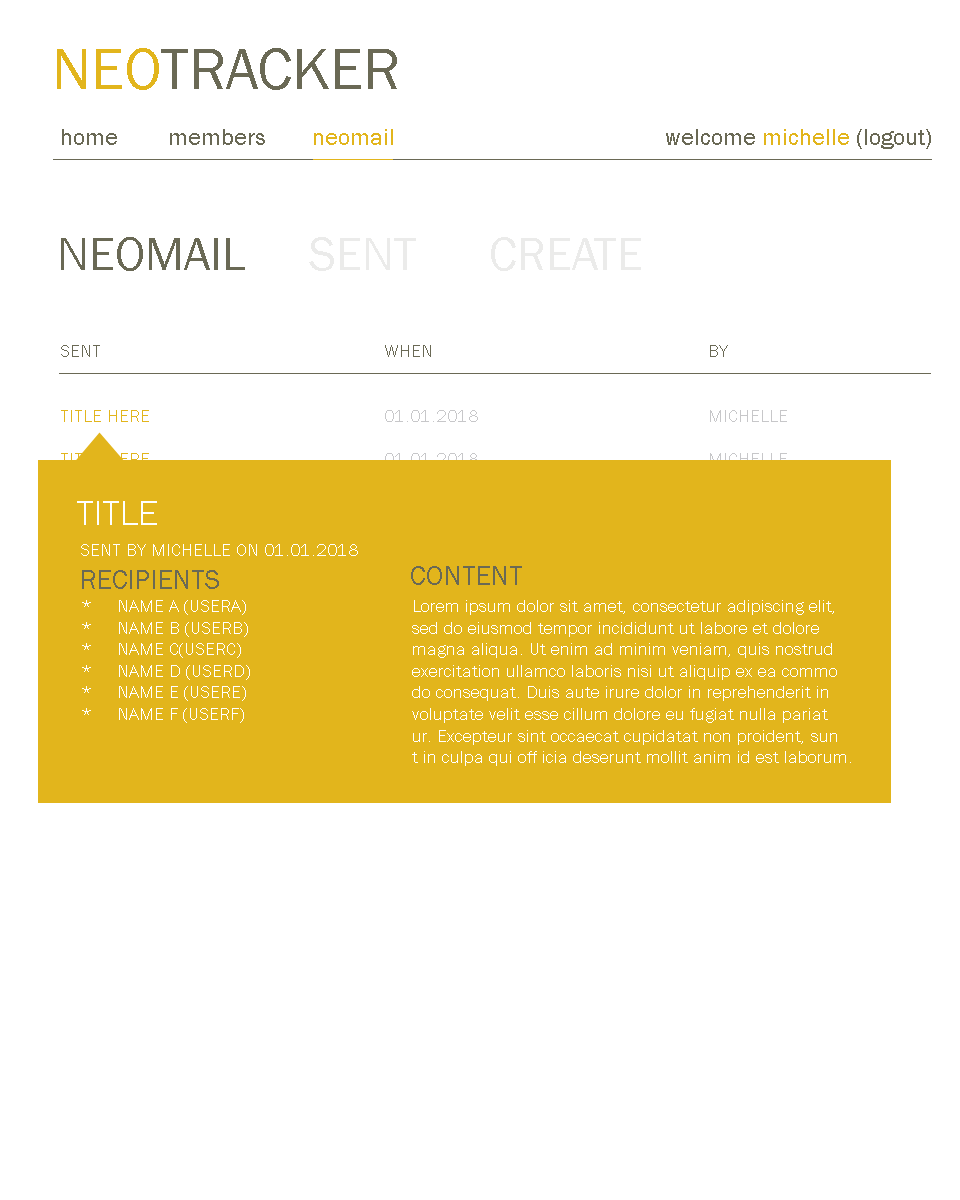
<style>
.page{position:relative;width:960px;height:1200px;background:#ffffff}
.page>*{position:absolute;margin:0}
.t1{font:60px "FranklinGothic-Book";color:#6a6955}
.t2{font:60px "FranklinGothic-Book";color:#e2b51c}
.t3{font:24px "FranklinGothic-Book";color:#6a6955}
.t4{font:24px "FranklinGothic-Book";color:#e2b51c}
.t5{font:48px "FranklinGothic-Book";color:#ebebea}
.t6{font:48px "FranklinGothic-Book";color:#6a6955}
.t7{font:36px "FranklinGothic-Book";color:#ffffff}
.t8{font:18px "FranklinGothic-Book";color:#ffffff}
.t9{font:28px "FranklinGothic-Book";color:#6a6955}
</style>
<div class="page">
<p class="t1" style="left:57px;top:48px;width:340px;height:42px"><span class="t2">NEO</span>TRACKER</p>
<p class="t3" style="left:62px;top:129px;width:331px;height:16px">home   members   <span class="t4">neomail</span></p>
<p class="t4" style="left:666px;top:129px;width:265px;height:20px"><span class="t3">welcome </span>michelle <span class="t3">(logout)</span></p>
<p class="t5" style="left:61px;top:237px;width:580px;height:34px"><span class="t6">NEOMAIL  </span>SENT  CREATE</p>
<p class="t7" style="left:77px;top:501px;width:80px;height:24px">TITLE</p>
<p class="t8" style="left:81px;top:544px;width:277px;height:12px">SENT BY MICHELLE ON 01.01.2018</p>
<p class="t9" style="left:411px;top:566px;width:111px;height:19px">CONTENT</p>
<p class="t9" style="left:82px;top:570px;width:137px;height:19px">RECIPIENTS</p>
<p class="t8" style="left:82px;top:600px;width:168px;height:123px">*  NAME A (USERA)<br>*  NAME B (USERB)<br>*  NAME C(USERC)<br>*  NAME D (USERD)<br>*  NAME E (USERE)<br>*  NAME F (USERF)</p>
<p class="t8" style="left:412px;top:600px;width:439px;height:166px">Lorem ipsum dolor sit amet, consectetur adipiscing elit,<br>sed do eiusmod tempor incididunt ut labore et dolore<br>magna aliqua. Ut enim ad minim veniam, quis nostrud<br>exercitation ullamco laboris nisi ut aliquip ex ea commo<br>do consequat. Duis aute irure dolor in reprehenderit in<br>voluptate velit esse cillum dolore eu fugiat nulla pariat<br>ur. Excepteur sint occaecat cupidatat non proident, sun<br>t in culpa qui off icia deserunt mollit anim id est laborum.</p>
</div>
